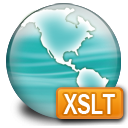
<style>
.page{position:relative;width:128px;height:128px;background:#ffffff}
.page>*{position:absolute;margin:0}
.t1{font:26.7px "Arial-BoldMT";letter-spacing:-0.04em;color:#ffffff;scale:0.8 1}
</style>
<div class="page">
<p class="t1" style="left:63px;top:94px;width:52px;height:20px">XSLT</p>
</div>
